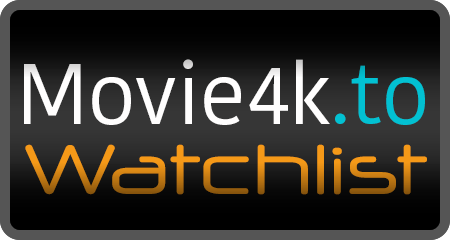
<style>
.page{position:relative;width:450px;height:240px}
.page>*{position:absolute;margin:0}
.t1{font:85px "KohinoorBangla-Regular";color:#fffefe}
.t2{font:85px "KohinoorBangla-Regular";color:#02c1d2}
.t3{font:72px "NeuropolXRg-Regular"}
</style>
<div class="page">
<p class="t1" style="left:24px;top:59px;width:401px;height:66px">Movie4k<span class="t2">.to</span></p>
<p class="t3" style="left:25px;top:144px;width:402px;height:51px">Watchlist</p>
</div>
